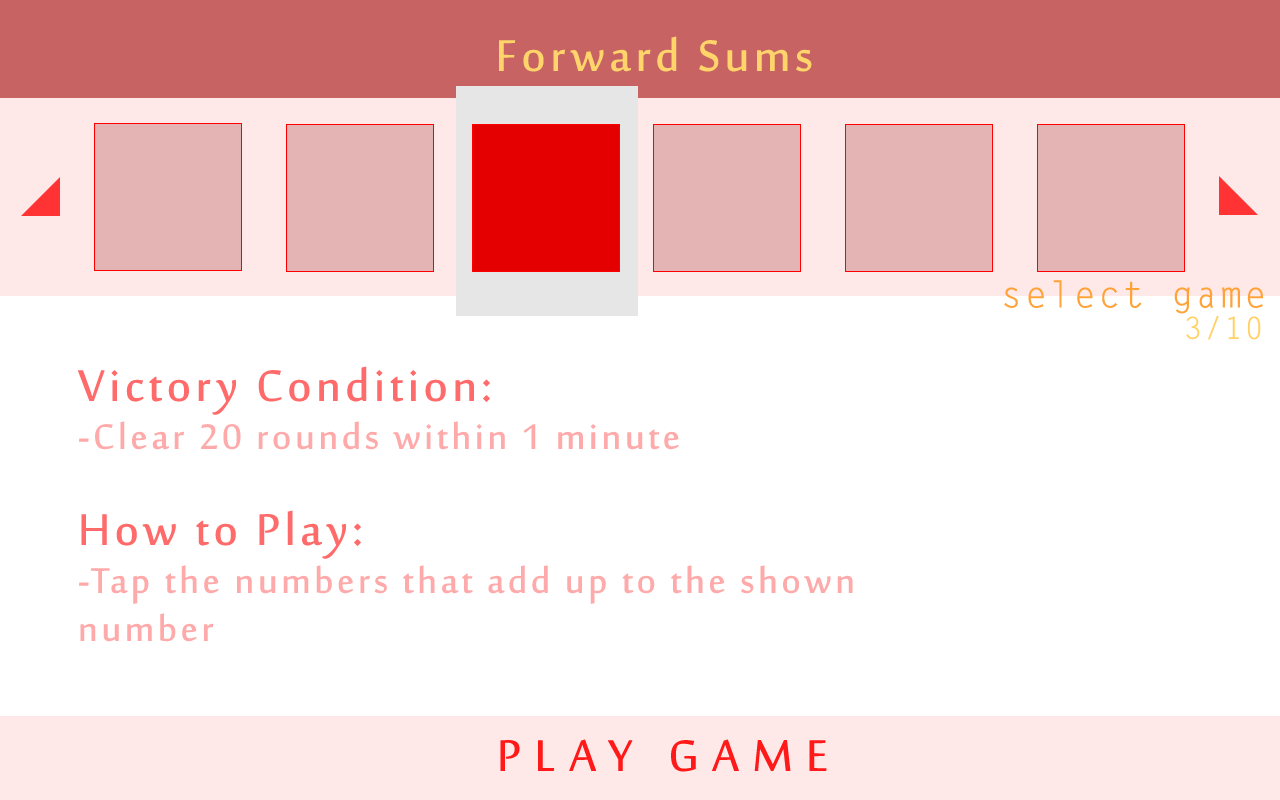
<style>
.page{position:relative;width:1280px;height:800px;background:#ffffff}
.page>*{position:absolute;margin:0}
.t1{font:60px "SakkalMajalla";letter-spacing:0.05em;color:#ffd46a;font-weight:bold}
.t2{font:36px "LetterGothicStd";letter-spacing:0.05em;color:#ffa238;font-weight:bold}
.t3{font:30px "LetterGothicStd";letter-spacing:0.05em;color:#ffd066;font-weight:bold}
.t4{font:48px/48px "SakkalMajalla";letter-spacing:0.05em;color:#ffaaaa;font-weight:bold}
.t5{font:60px/48px "SakkalMajalla";letter-spacing:0.05em;color:#ff6a6a;font-weight:bold}
.t6{font:60px "SakkalMajalla";letter-spacing:0.2em;color:#ff1919;font-weight:bold}
</style>
<div class="page">
<p class="t1" style="left:499px;top:36px;width:313px;height:36px">Forward Sums</p>
<p class="t2" style="left:1004px;top:280px;width:259px;height:34px">select game</p>
<p class="t3" style="left:1186px;top:316px;width:75px;height:24px">3/10</p>
<p class="t4" style="left:78px;top:366px;width:775px;height:276px"><span class="t5">Victory Condition:<br></span>-Clear 20 rounds within 1 minute<br><br><span class="t5">How to Play:<br></span>-Tap the numbers that add up to the shown number</p>
<p class="t6" style="left:500px;top:739px;width:327px;height:33px">PLAY GAME</p>
</div>
